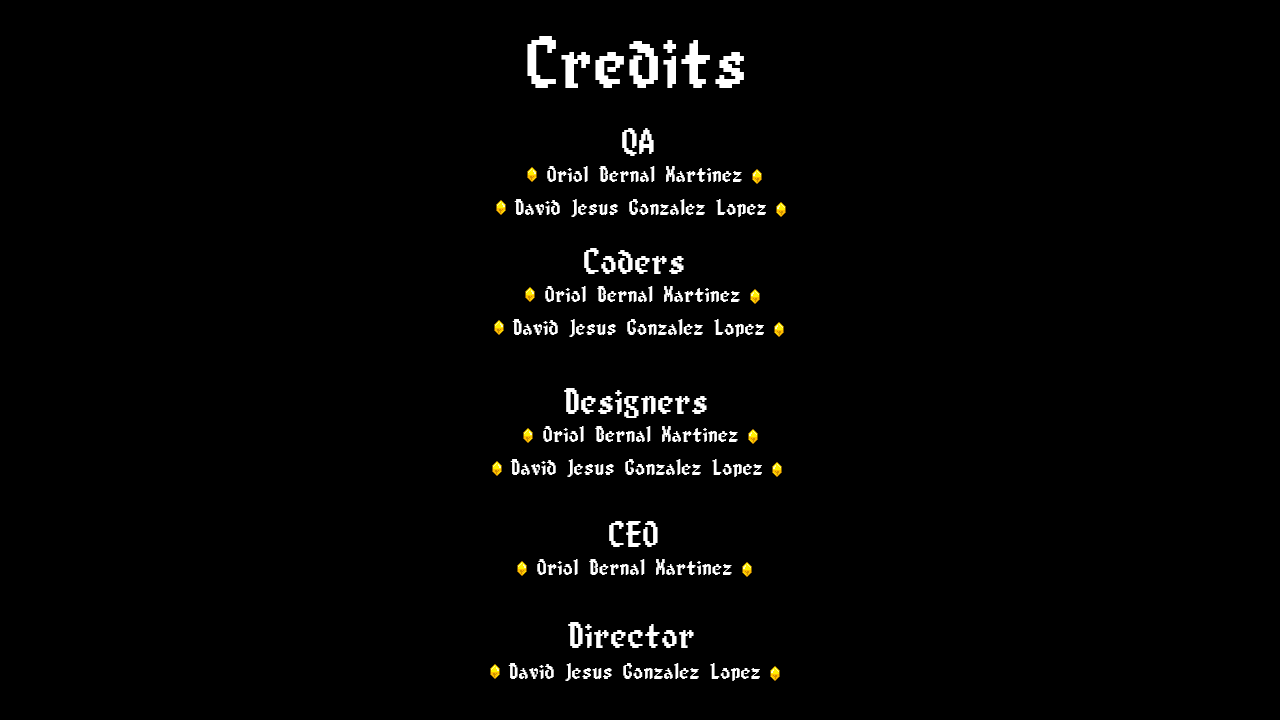
<style>
.page{position:relative;width:1280px;height:720px;background:#000000}
.page>*{position:absolute;margin:0}
.t1{font:60px "8-bitLimit(BRK)";letter-spacing:0.075em;color:#ffffff}
.t2{font:30px "8-bitLimit(BRK)";letter-spacing:0.075em;color:#ffffff}
.t3{font:18px "8-bitLimit(BRK)";letter-spacing:0.075em;color:#ffffff}
</style>
<div class="page">
<p class="t1" style="left:527px;top:36px;width:217px;height:52px">Credits</p>
<p class="t2" style="left:622px;top:128px;width:32px;height:28px">QA</p>
<p class="t3" style="left:547px;top:166px;width:195px;height:16px">Oriol Bernal Martinez</p>
<p class="t3" style="left:514px;top:199px;width:252px;height:18px">David Jesus Gonzalez Lopez</p>
<p class="t2" style="left:584px;top:248px;width:100px;height:26px">Coders</p>
<p class="t3" style="left:545px;top:286px;width:195px;height:16px">Oriol Bernal Martinez</p>
<p class="t3" style="left:512px;top:319px;width:252px;height:18px">David Jesus Gonzalez Lopez</p>
<p class="t2" style="left:564px;top:388px;width:143px;height:30px">Designers</p>
<p class="t3" style="left:543px;top:426px;width:195px;height:16px">Oriol Bernal Martinez</p>
<p class="t3" style="left:510px;top:459px;width:252px;height:18px">David Jesus Gonzalez Lopez</p>
<p class="t2" style="left:609px;top:521px;width:49px;height:26px">CEO</p>
<p class="t3" style="left:537px;top:559px;width:195px;height:16px">Oriol Bernal Martinez</p>
<p class="t2" style="left:568px;top:622px;width:126px;height:26px">Director</p>
<p class="t3" style="left:508px;top:663px;width:252px;height:18px">David Jesus Gonzalez Lopez</p>
</div>
